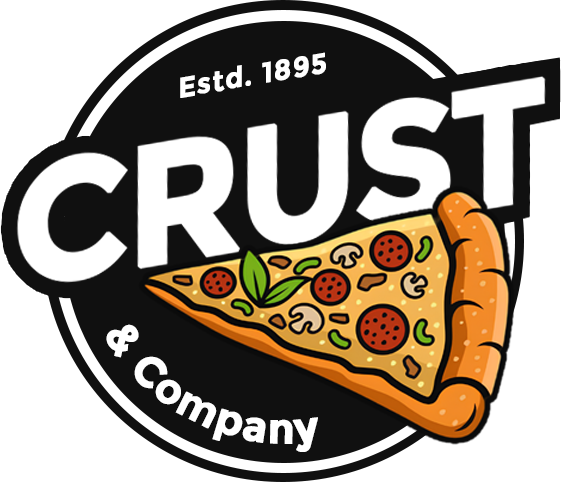
<style>
.page{position:relative;width:561px;height:482px;background:#ffffff}
.page>*{position:absolute;margin:0}
.t1{font:28px "Montserrat-Bold";letter-spacing:0.02em;color:#ffffff;font-weight:bold;font-style:italic}
.t2{font:43px/33px "Montserrat-Bold";letter-spacing:0.02em;color:#ffffff;font-weight:bold}
</style>
<div class="page">
<p class="t1" style="left:180px;top:52px;width:146px;height:46px;rotate:-10deg">Estd. 1895</p>
<p class="t2" style="left:106px;top:324px;width:212px;height:128px">&amp; Company</p>
</div>
